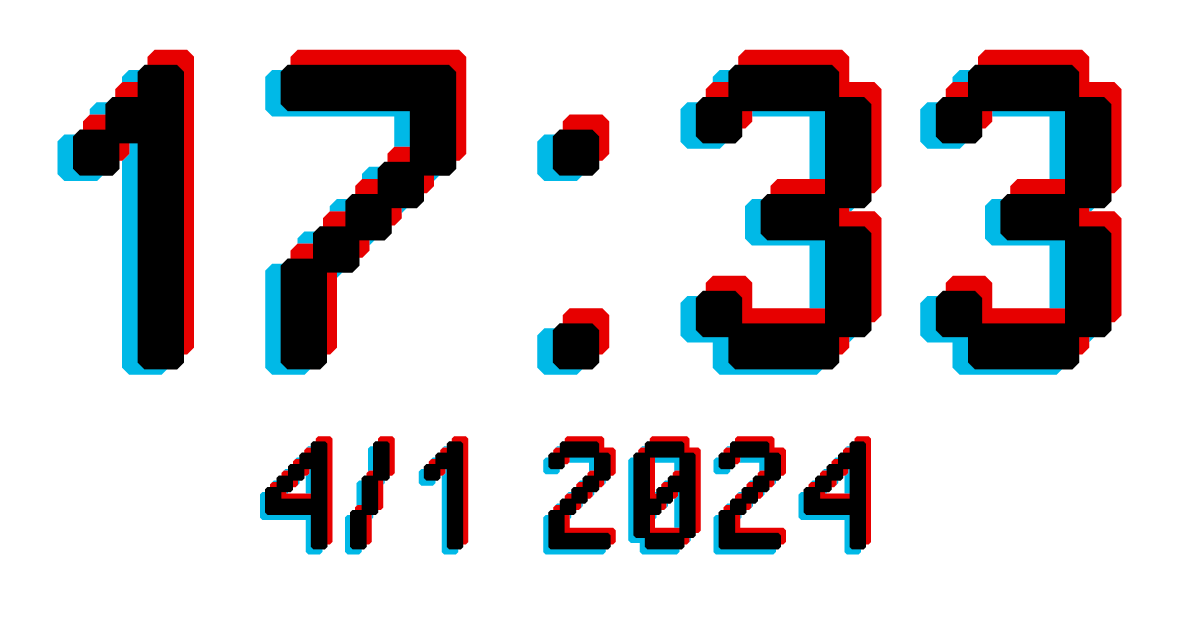
<style>
.page{position:relative;width:1178px;height:635px;background:#ffffff}
.page>*{position:absolute;margin:0}
.t1{font:516.7px "PixelOperatorSC";font-weight:bold}
.t2{font:516.7px "PixelOperatorSC";color:#000000;font-weight:bold}
.t3{font:183.3px "PixelOperatorSC";font-weight:bold}
.t4{font:183.3px "PixelOperatorSC";color:#000000;font-weight:bold}
</style>
<div class="page">
<p class="t1" style="left:83px;top:49px;width:1039px;height:306px">17:33</p>
<p class="t2" style="left:73px;top:64px;width:1039px;height:306px">17:33</p>
<p class="t2" style="left:57px;top:70px;width:1039px;height:305px">17:33</p>
<p class="t3" style="left:270px;top:436px;width:601px;height:109px">4/1 2024</p>
<p class="t3" style="left:260px;top:446px;width:601px;height:109px">4/1 2024</p>
<p class="t4" style="left:265px;top:441px;width:601px;height:109px">4/1 2024</p>
</div>
